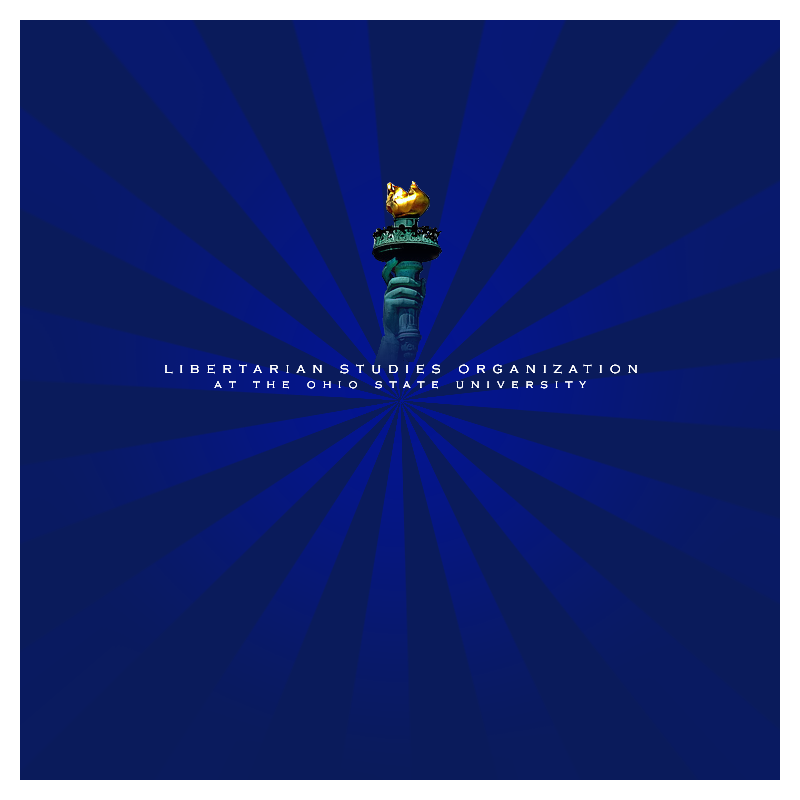
<style>
.page{position:relative;width:800px;height:800px;background:#0a1b5b}
.page>*{position:absolute;margin:0}
.t1{font:12px "CopperplateGothic-Light";letter-spacing:0.6em;color:#ffffff}
</style>
<div class="page">
<p class="t1" style="left:165px;top:364px;width:472px;height:10px">LIBERTARIAN STUDIES ORGANIZATION</p>
<p class="t1" style="left:165px;top:364px;width:472px;height:10px">LIBERTARIAN STUDIES ORGANIZATION</p>
<p class="t1" style="left:214px;top:381px;width:372px;height:8px">at the ohio state university</p>
<p class="t1" style="left:214px;top:381px;width:372px;height:8px">at the ohio state university</p>
</div>
